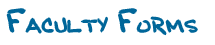
<style>
.page{position:relative;width:215px;height:45px;background:#ffffff}
.page>*{position:absolute;margin:0}
.t1{font:18px "BobbiesHand";color:#006699}
.t2{font:30px "BobbiesHand";color:#006699}
</style>
<div class="page">
<p class="t1" style="left:7px;top:9px;width:190px;height:26px"><span class="t2">F</span>ACULTY <span class="t2">F</span>ORMS</p>
</div>
